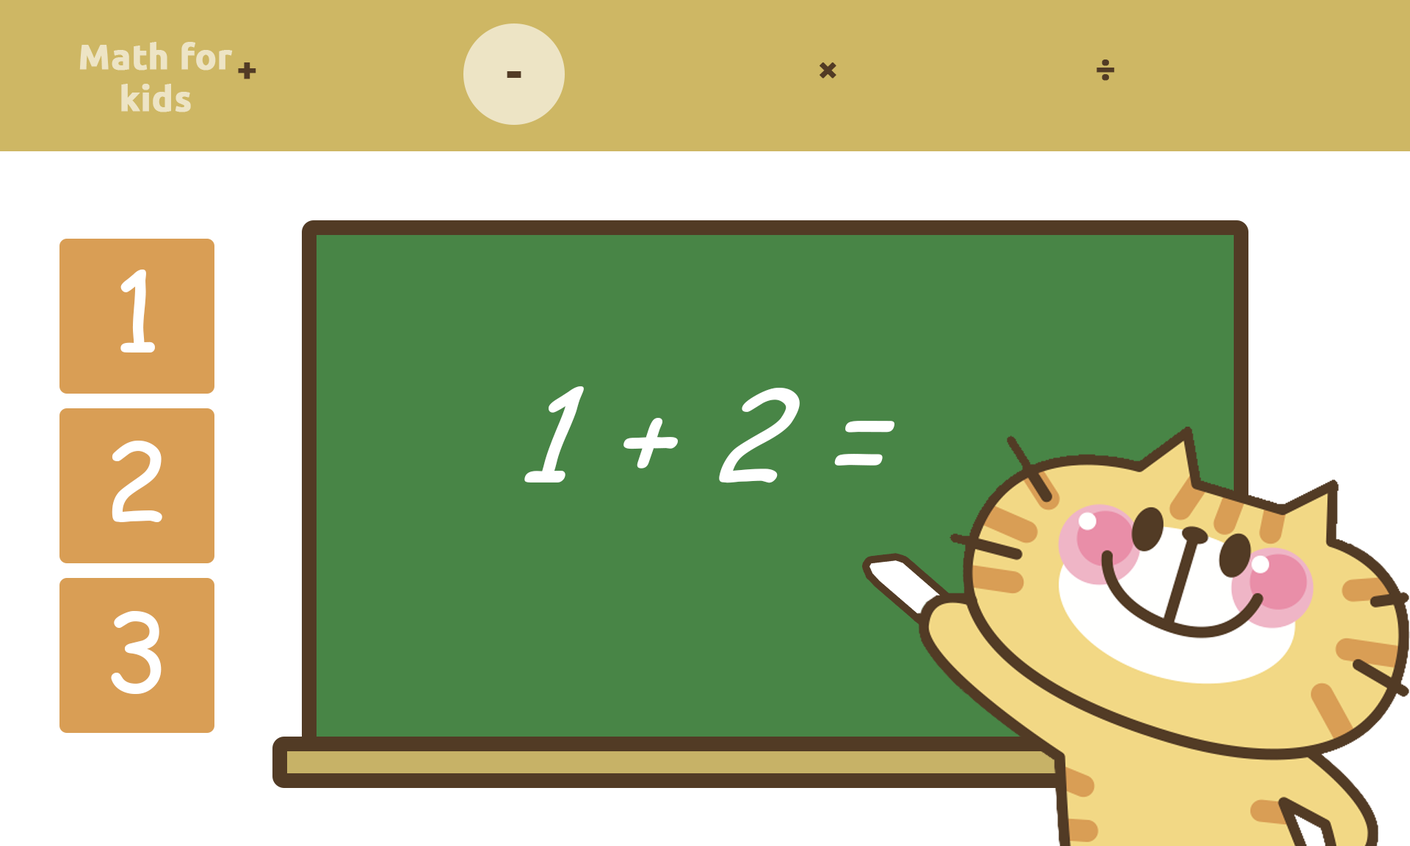
<style>
.page{position:relative;width:1410px;height:846px;background:#488546}
.page>*{position:absolute;margin:0}
.t1{font:35.2px "Ubuntu-Bold";color:#ede4c5;font-weight:bold}
.t2{font:35.2px "Ubuntu-Bold";color:#523b25;font-weight:bold}
.t3{font:44.1px "Ubuntu-Bold";color:#523b25;font-weight:bold}
.t4{font:108.7px "ComicSansMS";color:#ffffff}
.t5{font:126.3px "ComicSansMS-Italic";color:#ffffff;font-style:italic}
</style>
<div class="page">
<p class="t1" style="left:79px;top:42px;width:154px;height:70px;text-align:center">Math for kids</p>
<p class="t2" style="left:238px;top:62px;width:18px;height:17px">+</p>
<p class="t2" style="left:819px;top:62px;width:17px;height:17px">×</p>
<p class="t2" style="left:1096px;top:59px;width:19px;height:22px">÷</p>
<p class="t3" style="left:507px;top:71px;width:14px;height:7px">-</p>
<p class="t4" style="left:120px;top:269px;width:35px;height:83px">1</p>
<p class="t5" style="left:524px;top:386px;width:370px;height:97px">1 + 2 =</p>
<p class="t4" style="left:112px;top:441px;width:50px;height:81px">2</p>
<p class="t4" style="left:111px;top:611px;width:51px;height:83px">3</p>
</div>
